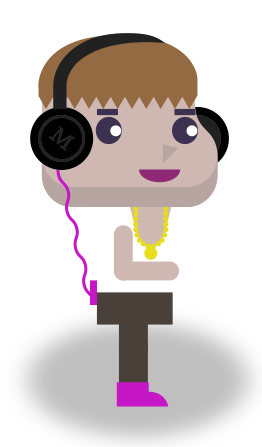
<style>
.page{position:relative;width:262px;height:447px;background:#ffffff}
.page>*{position:absolute;margin:0}
.t1{font:26.7px "JCkg";color:#222121}
</style>
<div class="page">
<p class="t1" style="left:49px;top:126px;width:26px;height:25px">M</p>
</div>
